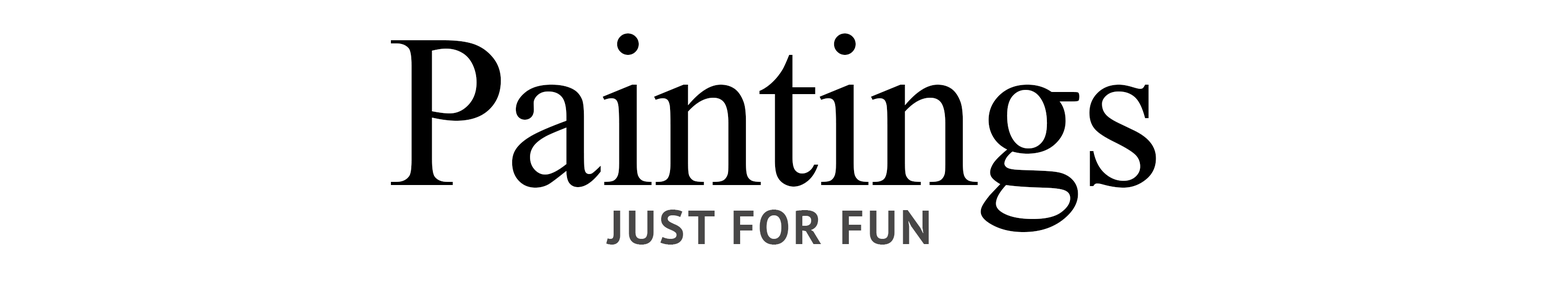
<style>
.page{position:relative;width:1568px;height:300px;background:#ffffff}
.page>*{position:absolute;margin:0}
.t1{font:217.8px "TimesNewRomanPSMT";letter-spacing:-0.02em;color:#000000}
.t2{font:47.9px "PTSans-Bold";letter-spacing:0.06em;color:#484747}
</style>
<div class="page">
<p class="t1" style="left:390px;top:33px;width:766px;height:199px">Paintings</p>
<p class="t2" style="left:606px;top:210px;width:323px;height:35px">JUST FOR FUN</p>
</div>
